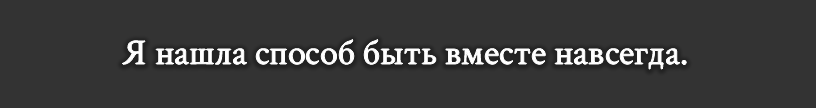
<style>
.page{position:relative;width:816px;height:108px;background:#333333}
.page>*{position:absolute;margin:0}
.t1{font:36px "CrimsonText-Regular";color:#ffffff}
</style>
<div class="page">
<p class="t1" style="left:122px;top:39px;width:565px;height:30px">Я нашла способ быть вместе навсегда.</p>
</div>
